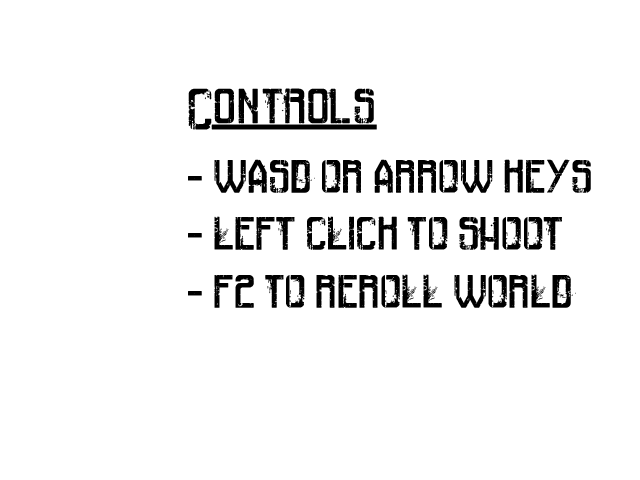
<style>
.page{position:relative;width:640px;height:480px;background:#ffffff}
.page>*{position:absolute;margin:0}
.t1{font:24px "RailwayToHells";color:#000000}
.t2{font:30px "RailwayToHells";color:#000000}
</style>
<div class="page">
<p class="t1" style="left:188px;top:88px;width:403px;height:220px"><span class="t2">Controls<br><br></span>- WASD OR ARROW KEYS<br><br>- LEFT CLICK TO SHOOT<br><br>- F2 TO REROLL WORLD</p>
</div>
